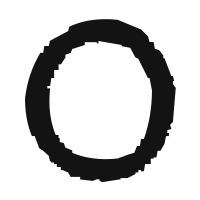
<style>
.page{position:relative;width:200px;height:200px;background:#ffffff}
.page>*{position:absolute;margin:0}
.t1{font:412.5px "Hosofuwafont";color:#131313}
</style>
<div class="page">
<p class="t1" style="left:25px;top:19px;width:151px;height:164px">o</p>
</div>
